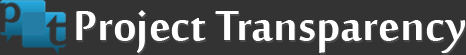
<style>
.page{position:relative;width:466px;height:55px;background:#333333}
.page>*{position:absolute;margin:0}
.t1{font:57px "SakkalMajallaBold";color:#ffffff}
</style>
<div class="page">
<p class="t1" style="left:76px;top:10px;width:390px;height:43px">Project Transparency</p>
</div>
